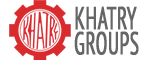
<style>
.page{position:relative;width:151px;height:60px;background:#ffffff}
.page>*{position:absolute;margin:0}
.t1{font:31.8px "PTSans-Narrow";color:#666666;font-weight:bold;scale:0.67 1}
</style>
<div class="page">
<p class="t1" style="left:74px;top:6px;width:65px;height:49px">KHATRY<br>GROUPS</p>
</div>
